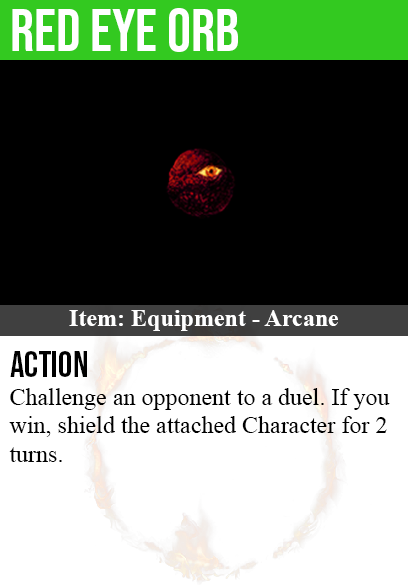
<style>
.page{position:relative;width:408px;height:585px;background:#000000}
.page>*{position:absolute;margin:0}
.t1{font:60px "BebasNeue-Regular";color:#ffffff}
.t2{font:24px "TimesNewRomanPS-BoldMT";color:#ffffff}
.t3{font:36px "BebasNeue-Regular";color:#000000}
.t4{font:24px "TimesNewRomanPSMT";color:#000000}
</style>
<div class="page">
<p class="t1" style="left:12px;top:8px;width:226px;height:44px">red eye orb</p>
<p class="t2" style="left:69px;top:310px;width:269px;height:21px">Item: Equipment - Arcane</p>
<p class="t3" style="left:10px;top:351px;width:77px;height:26px">action</p>
<p class="t4" style="left:9px;top:388px;width:381px;height:74px">Challenge an opponent to a duel. If you<br>win, shield the attached Character for 2<br>turns.</p>
</div>
